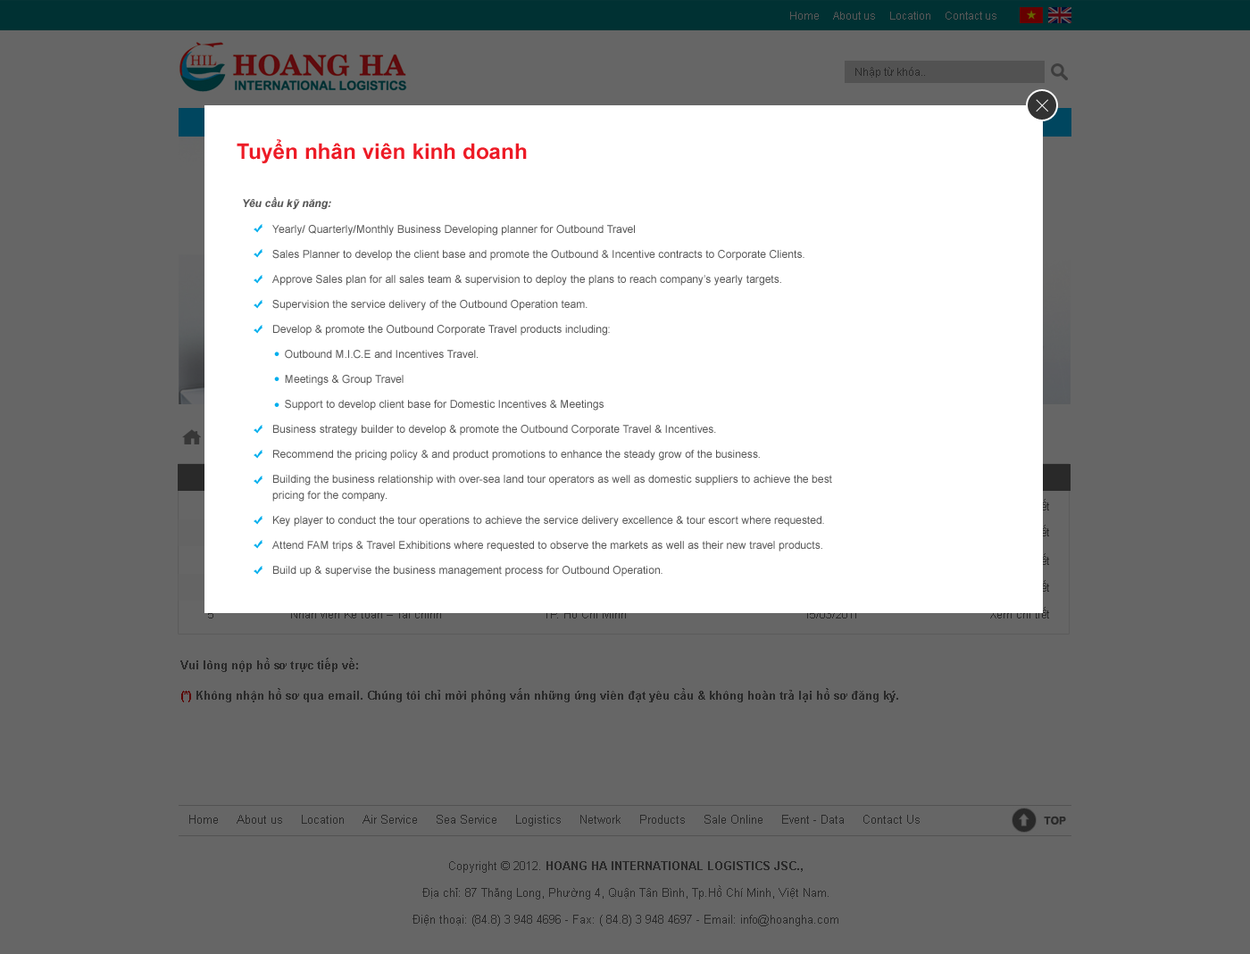
<style>
.page{position:relative;width:1250px;height:954px;background:#666666}
.page>*{position:absolute;margin:0}
.t1{font:10.7px "ArialMT";color:#585858}
.t2{font:10.7px "ArialMT";color:#292929}
.t3{font:21.4px "Arial-BoldMT";letter-spacing:0.01em;color:#ed1b26}
.t4{font:10.7px "Arial-BoldItalicMT";letter-spacing:0.01em;color:#555555}
.t5{font:10.7px/16.1px "ArialMT";letter-spacing:0.01em;color:#555555}
.t6{font:11.6px/17px "Arial-BoldMT";color:#292929}
.t7{font:11.6px "ArialMT";color:#292929}
.t8{font:11.6px/17.9px "ArialMT";color:#292929}
.t9{font:11.6px/17.9px "Arial-BoldMT";color:#292929}
</style>
<div class="page">
<p class="t1" style="left:790px;top:12px;width:206px;height:8px">Home     About us     Location     Contact us</p>
<p class="t2" style="left:855px;top:67px;width:70px;height:11px">Nhập từ khóa..</p>
<p class="t3" style="left:237px;top:139px;width:290px;height:24px">Tuyển nhân viên kinh doanh</p>
<p class="t4" style="left:243px;top:197px;width:88px;height:13px">Yêu cầu kỹ năng:</p>
<p class="t5" style="left:272px;top:225px;width:560px;height:352px">Yearly/ Quarterly/Monthly Business Developing planner for Outbound Travel<br>Sales Planner to develop the client base and promote the Outbound &amp; Incentive contracts to Corporate Clients.<br>Approve Sales plan for all sales team &amp; supervision to deploy the plans to reach company’s yearly targets.<br>Supervision the service delivery of the Outbound Operation team.<br>Develop &amp; promote the Outbound Corporate Travel products including:<br>    Outbound M.I.C.E and Incentives Travel.<br>    Meetings &amp; Group Travel<br>    Support to develop client base for Domestic Incentives &amp; Meetings<br>Business strategy builder to develop &amp; promote the Outbound Corporate Travel &amp; Incentives.<br>Recommend the pricing policy &amp; and product promotions to enhance the steady grow of the business.<br>Building the business relationship with over-sea land tour operators as well as domestic suppliers to achieve the best pricing for the company.<br>Key player to conduct the tour operations to achieve the service delivery excellence &amp; tour escort where requested.<br>Attend FAM trips &amp; Travel Exhibitions where requested to observe the markets as well as their new travel products.<br>Build up &amp; supervise the business management process for Outbound Operation.</p>
<p class="t6" style="left:180px;top:658px;width:718px;height:44px">Vui lòng nộp hồ sơ trực tiếp về: <br>(*) Không nhận hồ sơ qua email. Chúng tôi chỉ mời phỏng vấn những ứng viên đạt yêu cầu &amp; không hoàn trả lại hồ sơ đăng ký.</p>
<p class="t7" style="left:189px;top:815px;width:730px;height:12px">Home     About us     Location     Air Service     Sea Service     Logistics     Network     Products     Sale Online     Event - Data     Contact Us</p>
<p class="t8" style="left:412px;top:861px;width:426px;height:66px;text-align:center">Copyright © 2012. <span class="t9">HOANG HA INTERNATIONAL LOGISTICS JSC.,<br></span>Địa chỉ: 87 Thăng Long, Phường 4, Quận Tân Bình, Tp.Hồ Chí Minh, Việt Nam.<br>Điện thoại: (84.8) 3 948 4696 - Fax: ( 84.8) 3 948 4697 - Email: info@hoangha.com</p>
</div>
